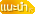
<style>
.page{position:relative;width:35px;height:14px}
.page>*{position:absolute;margin:0}
.t1{font:11px "NotoSansThai-Regular"}
</style>
<div class="page">
<p class="t1" style="left:1px;top:1px;width:27px;height:10px">แนะนำ</p>
</div>
